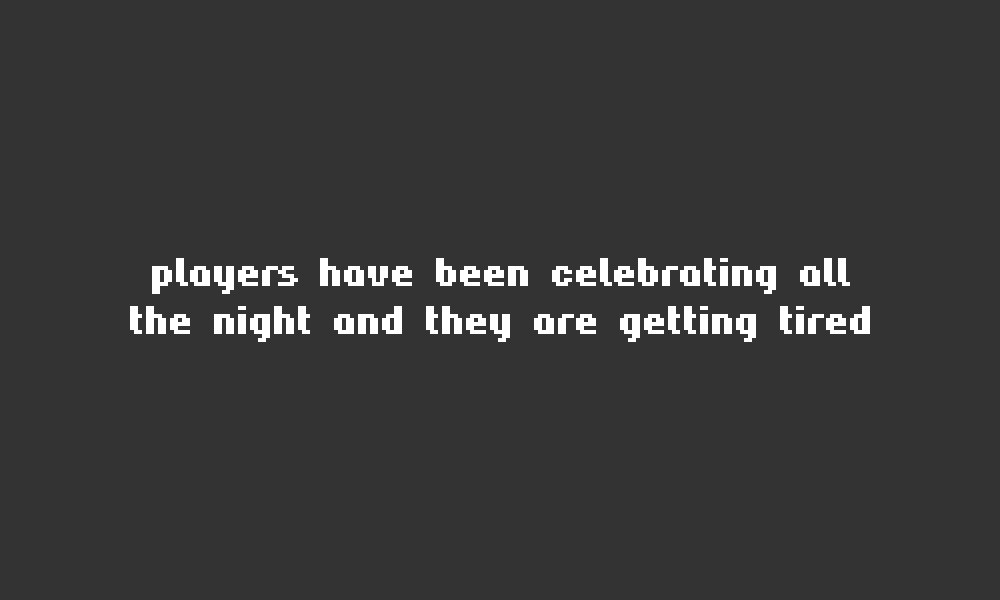
<style>
.page{position:relative;width:1000px;height:600px;background:#333333}
.page>*{position:absolute;margin:0}
.t1{font:40px "Hardpixel";color:#ffffff}
</style>
<div class="page">
<p class="t1" style="left:130px;top:258px;width:740px;height:84px;text-align:center">players have been celebrating all<br>the night and they are getting tired</p>
</div>
